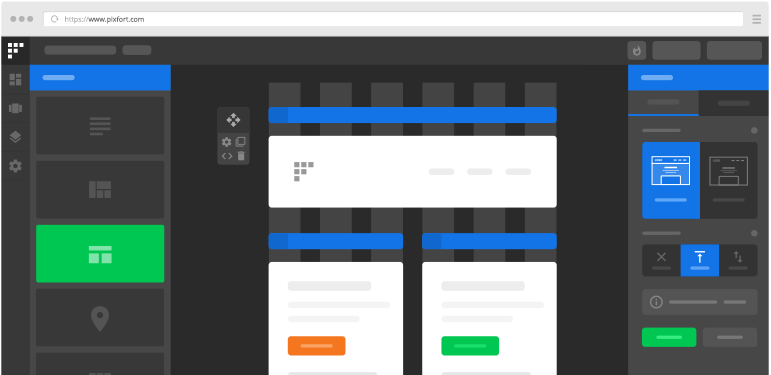
<style>
.page{position:relative;width:771px;height:375px;background:#2a2a2a}
.page>*{position:absolute;margin:0}
.t1{font:7px "OpenSans";color:#666666}
.t2{font:7px "OpenSans";color:#b3b3b3}
</style>
<div class="page">
<p class="t1" style="left:65px;top:16px;width:79px;height:8px"><span class="t2">https://</span>www.pixfort.com</p>
</div>
